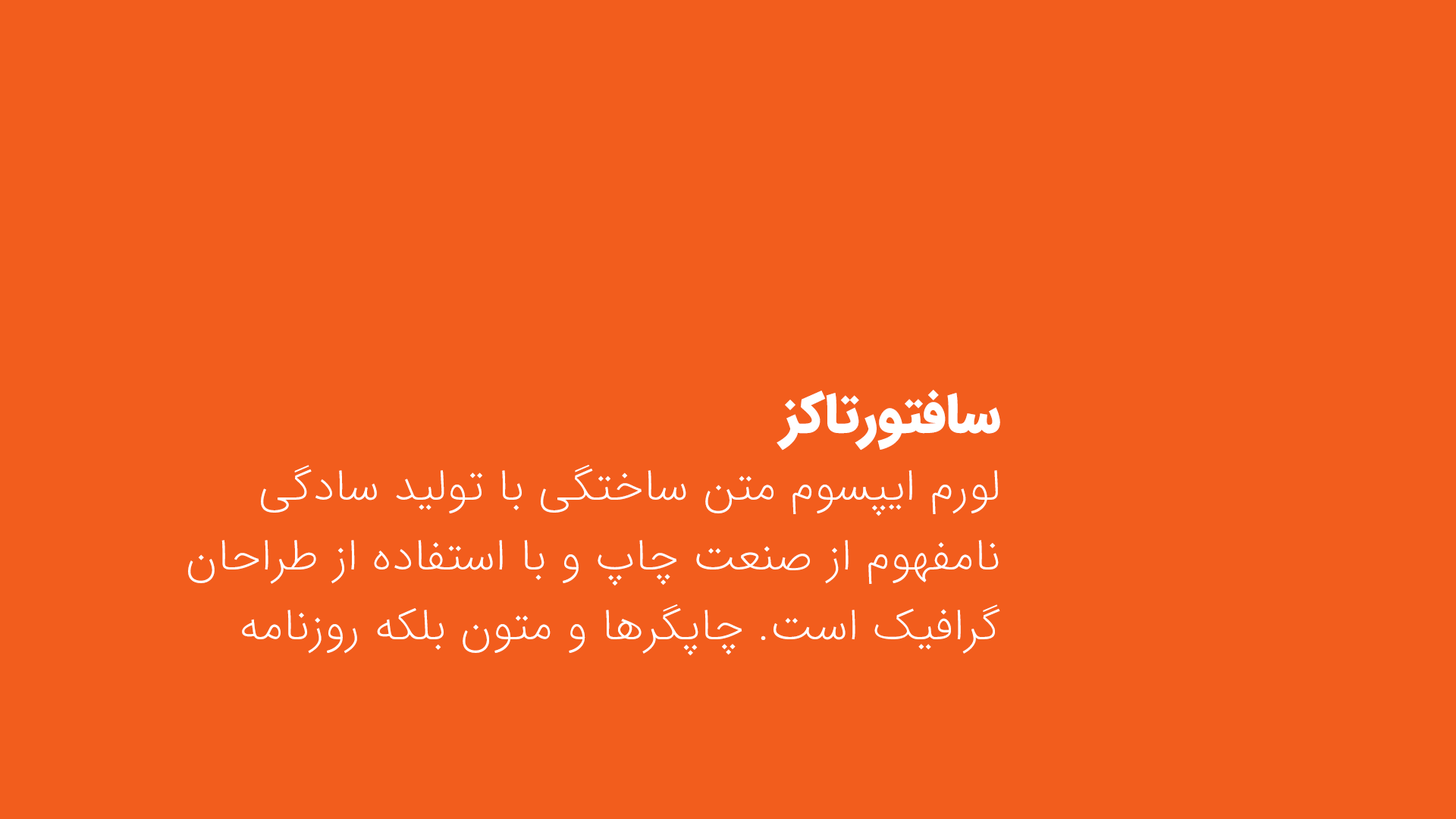
<style>
.page{position:relative;width:1456px;height:819px;background:#f25d1d}
.page>*{position:absolute;margin:0}
.t1{font:45.5px/69.8px "IRANSans-UltraLight";color:#ffffff}
.t2{font:54.6px/69.8px "IRANSans-Black";color:#ffffff;text-transform:uppercase}
</style>
<div class="page">
<p class="t1" style="left:188px;top:390px;width:812px;height:266px"><span class="t2">سافتورتاکز<br></span>لورم ایپسوم متن ساختگی با تولید سادگی نامفهوم از صنعت چاپ و با استفاده از طراحان گرافیک است. چاپگرها و متون بلکه روزنامه</p>
</div>
